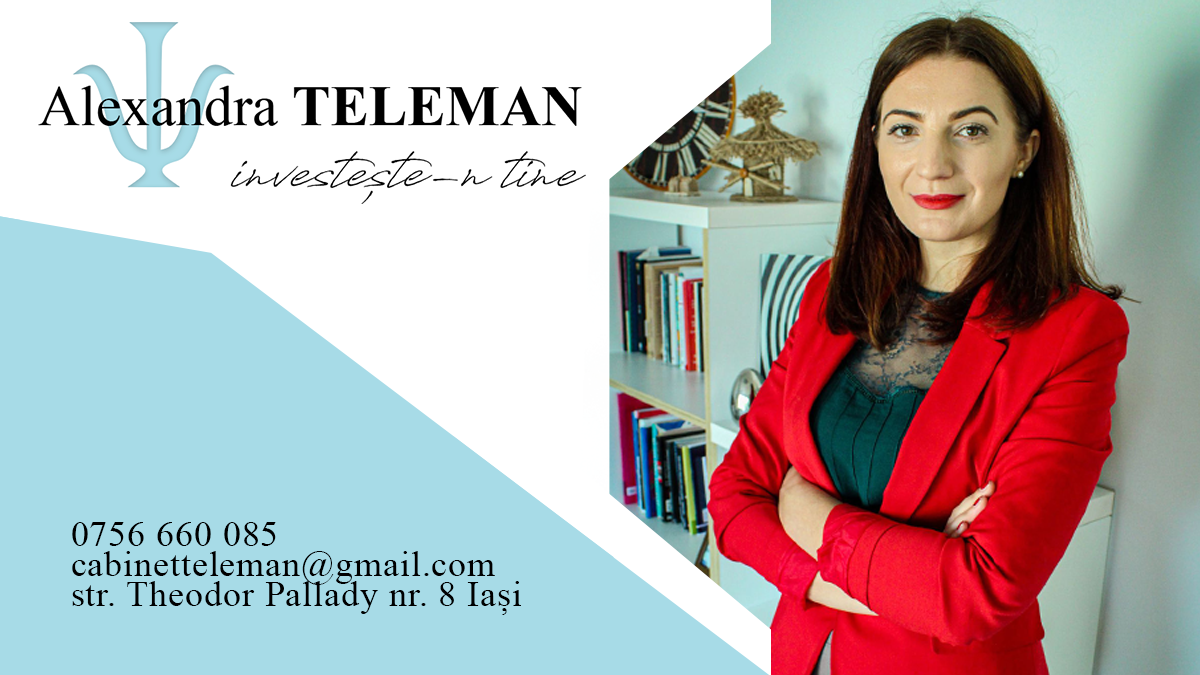
<style>
.page{position:relative;width:1200px;height:675px;background:#ffffff}
.page>*{position:absolute;margin:0}
.t1{font:36px/30px "TimesNewRomanPSMT";letter-spacing:0.025em;color:#000000}
</style>
<div class="page">
<p class="t1" style="left:72px;top:522px;width:449px;height:93px">0756 660 085<br>cabinetteleman@gmail.com<br>str. Theodor Pallady nr. 8 Iași</p>
</div>
